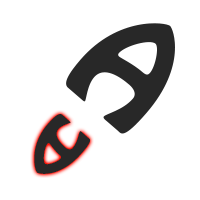
<style>
.page{position:relative;width:200px;height:200px;background:#ffffff}
.page>*{position:absolute;margin:0}
.t1{font:133.8px "HoboStd";letter-spacing:0.025em;color:#282828}
.t2{font:70.9px "HoboStd";letter-spacing:0.025em;color:#282828}
</style>
<div class="page">
<p class="t1" style="left:66px;top:23px;width:109px;height:111px;rotate:41deg">A</p>
<p class="t2" style="left:34px;top:114px;width:57px;height:60px;rotate:42deg">A</p>
</div>
